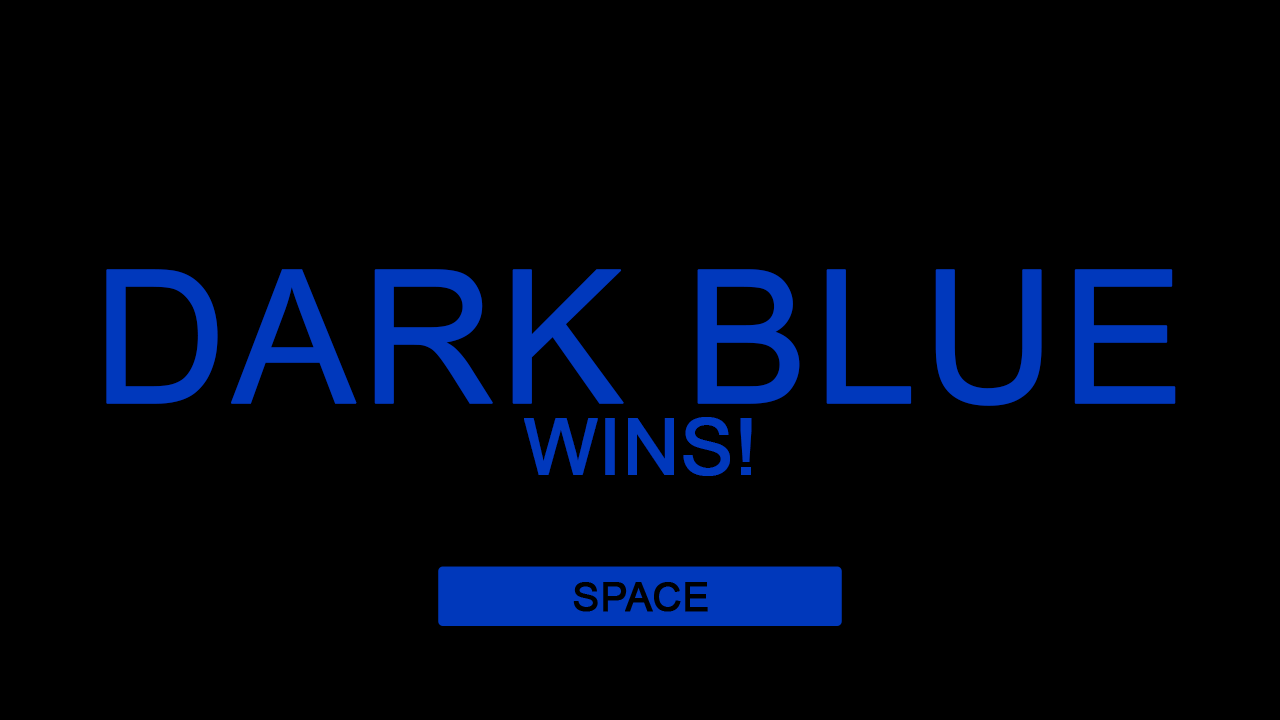
<style>
.page{position:relative;width:1280px;height:720px;background:#000000}
.page>*{position:absolute;margin:0}
.t1{font:185.4px "ArialMT";color:#0038bc;font-weight:bold}
.t2{font:77.9px "ArialMT";color:#0038bc;font-weight:bold}
</style>
<div class="page">
<p class="t1" style="left:106px;top:269px;width:1070px;height:137px">DARK BLUE</p>
<p class="t2" style="left:524px;top:417px;width:228px;height:59px">WINS!</p>
</div>
